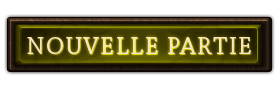
<style>
.page{position:relative;width:280px;height:90px;background:#ffffff}
.page>*{position:absolute;margin:0}
.t1{font:25px "ChaparralPro-Regular";letter-spacing:0.05em;color:#f4e5bf;text-transform:uppercase}
</style>
<div class="page">
<p class="t1" style="left:27px;top:37px;width:224px;height:17px">nouvelle partie</p>
</div>
